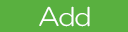
<style>
.page{position:relative;width:128px;height:32px;background:#59b03f}
.page>*{position:absolute;margin:0}
.t1{font:24px "HGMaruGothicMPRO";color:#ffffff}
</style>
<div class="page">
<p class="t1" style="left:39px;top:6px;width:51px;height:21px">Add</p>
</div>
